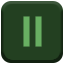
<style>
.page{position:relative;width:64px;height:64px;background:#234021}
.page>*{position:absolute;margin:0}
.t1{font:48px "SegoeUISymbol";color:#68af62}
</style>
<div class="page">
<p class="t1" style="left:23px;top:16px;width:19px;height:31px">⏸</p>
</div>
